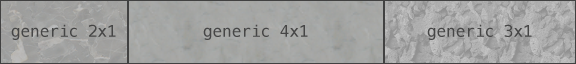
<style>
.page{position:relative;width:576px;height:64px}
.page>*{position:absolute;margin:0}
.t1{font:16px "Menlo-Regular";color:#464646}
</style>
<div class="page">
<p class="t1" style="left:11px;top:24px;width:105px;height:16px">generic 2x1</p>
<p class="t1" style="left:203px;top:24px;width:105px;height:16px">generic 4x1</p>
<p class="t1" style="left:427px;top:24px;width:105px;height:16px">generic 3x1</p>
</div>
